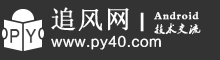
<style>
.page{position:relative;width:220px;height:60px;background:#333333}
.page>*{position:absolute;margin:0}
.t1{font:25.3px "SimSun";letter-spacing:0.05em;color:#ffffff;font-weight:bold}
.t2{font:24px "2.0-";letter-spacing:0.05em;color:#fffefe;font-weight:bold}
.t3{font:10.7px/13.3px "2.0-";letter-spacing:0.05em;color:#ffffff;font-weight:bold}
.t4{font:13.3px "FZLTXHK--GBK1-0";letter-spacing:0.05em;color:#ffffff;font-weight:bold}
</style>
<div class="page">
<p class="t1" style="left:51px;top:7px;width:78px;height:24px">追风网</p>
<p class="t2" style="left:140px;top:12px;width:4px;height:20px">|</p>
<p class="t3" style="left:154px;top:11px;width:47px;height:24px">Android<br>技术交流</p>
<p class="t4" style="left:51px;top:35px;width:110px;height:15px">www.py40.com</p>
</div>
